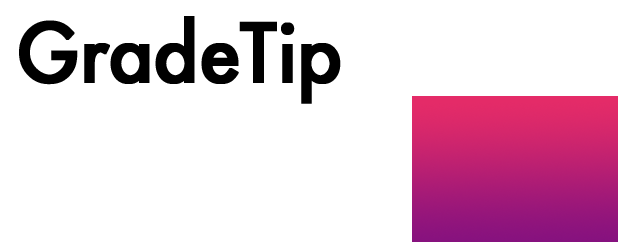
<style>
.page{position:relative;width:629px;height:250px;background:#ffffff}
.page>*{position:absolute;margin:0}
.t1{font:80px "Futura-Medium";letter-spacing:-0.03em;color:#000000;font-weight:bold;scale:0.95 1}
</style>
<div class="page">
<p class="t1" style="left:19px;top:16px;width:322px;height:88px">GradeTip</p>
</div>
